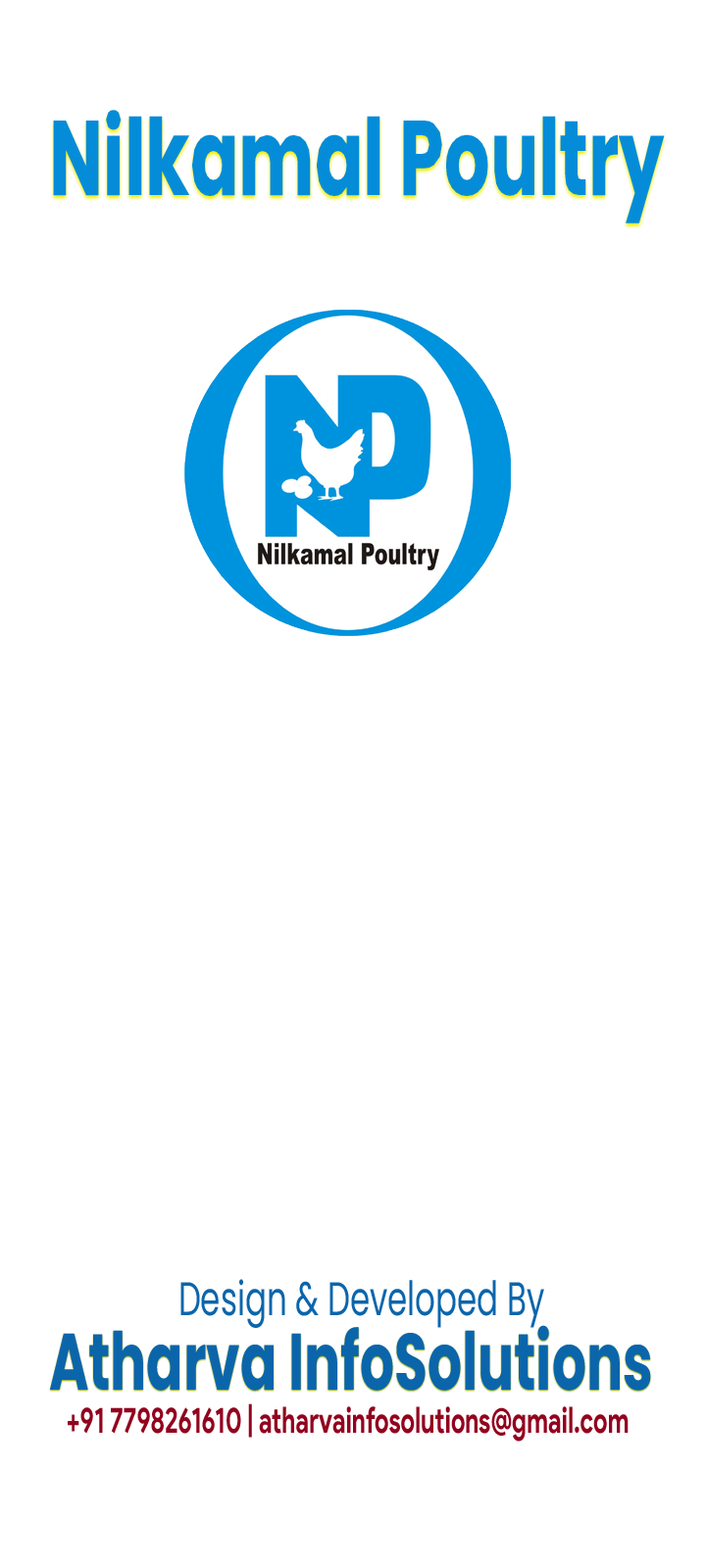
<style>
.page{position:relative;width:706px;height:1568px;background:#ffffff}
.page>*{position:absolute;margin:0}
.t1{font:106.2px "Poppins-Bold";color:#058cd9;scale:0.67 1}
.t2{font:47.2px "Poppins-Regular";color:#0b65ab;scale:0.67 1}
.t3{font:79.9px "Poppins-Bold";color:#0b65ab;scale:0.67 1}
.t4{font:36.3px "ProductSans-Bold";color:#92031e;scale:0.67 1}
</style>
<div class="page">
<p class="t1" style="left:53px;top:110px;width:611px;height:113px">Nilkamal Poultry</p>
<p class="t2" style="left:180px;top:1279px;width:364px;height:49px">Design &amp; Developed By</p>
<p class="t3" style="left:50px;top:1325px;width:601px;height:66px">Atharva InfoSolutions</p>
<p class="t4" style="left:68px;top:1403px;width:560px;height:39px">+91 7798261610 | atharvainfosolutions@gmail.com</p>
</div>
